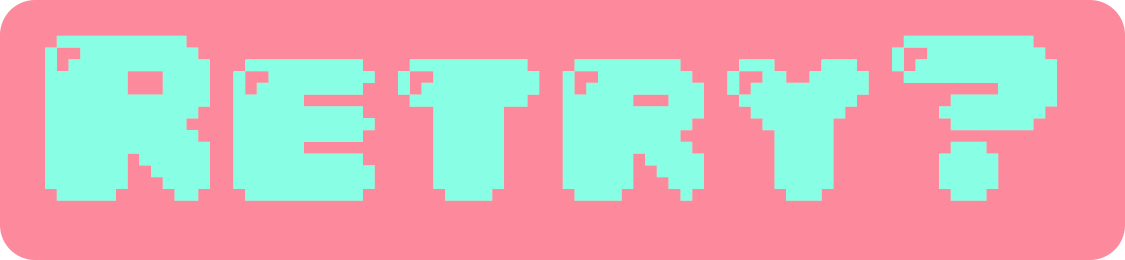
<style>
.page{position:relative;width:1125px;height:260px;background:#fd899d}
.page>*{position:absolute;margin:0}
.t1{font:200px "04b30";color:#88ffe4}
</style>
<div class="page">
<p class="t1" style="left:45px;top:35px;width:1012px;height:166px">Retry?</p>
</div>
